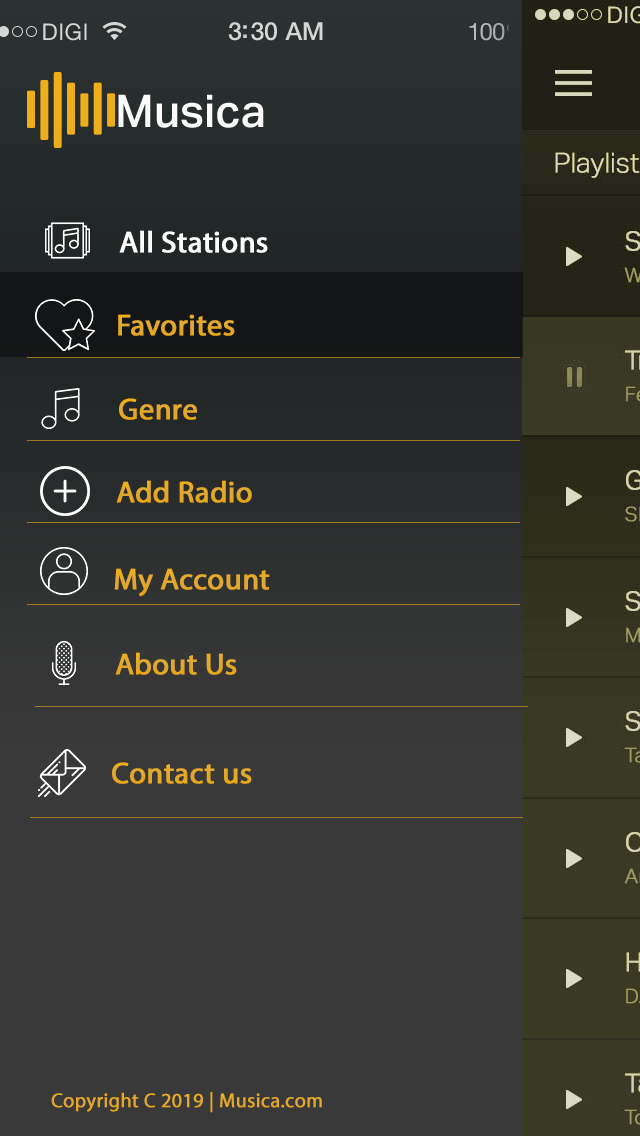
<style>
.page{position:relative;width:640px;height:1136px;background:#393939}
.page>*{position:absolute;margin:0}
.t1{font:45.2px "AktivGroteskTrial-Medium";color:#fcfcfc}
.t2{font:30px "MyriadPro-Regular";color:#ffffff;font-weight:bold}
.t3{font:30px "MyriadPro-Regular";color:#e3a829;font-weight:bold}
.t4{font:30px "MyriadPro-Regular";color:#e3a82b;font-weight:bold}
.t5{font:30px "MyriadPro-Regular";color:#e4a826;font-weight:bold}
.t6{font:30px "MyriadPro-Regular";color:#e4a828;font-weight:bold}
.t7{font:30px "MyriadPro-Regular";color:#e4a829;font-weight:bold}
.t8{font:20px "MyriadPro-Regular";color:#e3a82b;font-weight:bold}
</style>
<div class="page">
<p class="t1" style="left:118px;top:94px;width:146px;height:34px">Musica</p>
<p class="t2" style="left:119px;top:230px;width:149px;height:23px">All Stations</p>
<p class="t3" style="left:118px;top:314px;width:117px;height:22px">Favorites</p>
<p class="t4" style="left:119px;top:398px;width:78px;height:22px">Genre</p>
<p class="t5" style="left:116px;top:480px;width:136px;height:23px">Add Radio</p>
<p class="t4" style="left:114px;top:568px;width:156px;height:29px">My Account</p>
<p class="t6" style="left:115px;top:652px;width:122px;height:23px">About Us</p>
<p class="t7" style="left:112px;top:762px;width:140px;height:22px">Contact us</p>
<p class="t8" style="left:51px;top:1092px;width:271px;height:21px">Copyright C 2019 | Musica.com</p>
</div>
